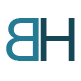
<style>
.page{position:relative;width:81px;height:81px;background:#ffffff}
.page>*{position:absolute;margin:0}
.t1{font:60px "ArialMT";letter-spacing:-0.025em;color:#267b94}
.t2{font:60px "ArialMT";letter-spacing:-0.025em;color:#164756}
</style>
<div class="page">
<p class="t1" style="left:6px;top:18px;width:33px;height:43px;rotate:180deg">B</p>
<p class="t2" style="left:40px;top:18px;width:35px;height:43px">H</p>
</div>
